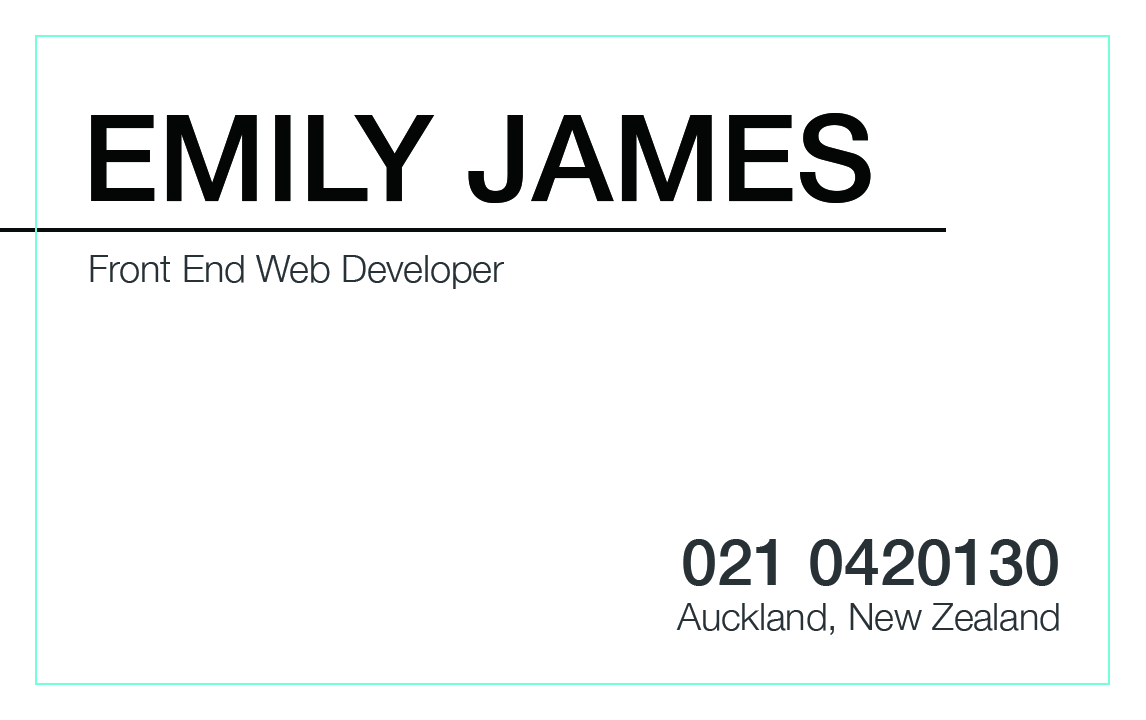
<style>
.page{position:relative;width:1146px;height:720px;background:#ffffff}
.page>*{position:absolute;margin:0}
.t1{font:120.8px "HelveticaNeue-Medium";color:#040606}
.t2{font:37.5px "HelveticaNeue-Light";color:#283236}
.t3{font:65px "HelveticaNeue-Medium";color:#283236}
</style>
<div class="page">
<p class="t1" style="left:91px;top:113px;width:780px;height:90px">EMILY JAMES</p>
<p class="t2" style="left:90px;top:255px;width:414px;height:34px">Front End Web Developer</p>
<p class="t2" style="left:676px;top:539px;width:383px;height:96px;text-align:right"><span class="t3">021 0420130 <br></span>Auckland, New Zealand</p>
</div>
